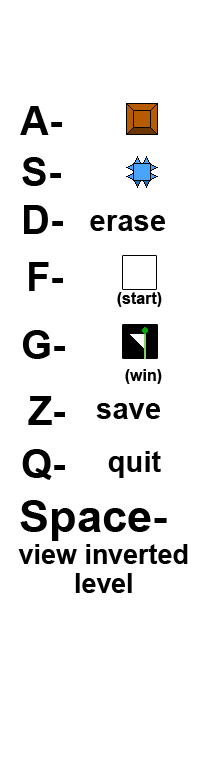
<style>
.page{position:relative;width:200px;height:768px;background:#ffffff}
.page>*{position:absolute;margin:0}
.t1{font:39.9px "Arial-BoldMT";color:#000000}
.t2{font:29.5px "Arial-BoldMT";color:#000000}
.t3{font:16px "Arial-BoldMT";color:#000000}
.t4{font:45.3px "Arial-BoldMT";color:#000000}
.t5{font:26.9px/28.5px "Arial-BoldMT";color:#000000}
</style>
<div class="page">
<p class="t1" style="left:20px;top:106px;width:42px;height:29px">A-</p>
<p class="t1" style="left:22px;top:157px;width:39px;height:29px">S-</p>
<p class="t1" style="left:24px;top:205px;width:39px;height:29px">D-</p>
<p class="t2" style="left:90px;top:215px;width:75px;height:16px">erase</p>
<p class="t1" style="left:29px;top:262px;width:34px;height:29px">F-</p>
<p class="t3" style="left:117px;top:292px;width:45px;height:15px">(start)</p>
<p class="t1" style="left:22px;top:330px;width:43px;height:29px">G-</p>
<p class="t3" style="left:125px;top:369px;width:37px;height:15px">(win)</p>
<p class="t1" style="left:28px;top:396px;width:37px;height:29px">Z-</p>
<p class="t2" style="left:96px;top:403px;width:64px;height:16px">save</p>
<p class="t1" style="left:22px;top:449px;width:43px;height:31px">Q-</p>
<p class="t2" style="left:108px;top:451px;width:53px;height:27px">quit</p>
<p class="t4" style="left:20px;top:500px;width:147px;height:41px">Space-</p>
<p class="t5" style="left:18px;top:544px;width:170px;height:49px;text-align:center">view inverted<br>level</p>
</div>
